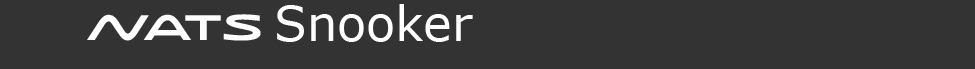
<style>
.page{position:relative;width:975px;height:69px;background:#333333}
.page>*{position:absolute;margin:0}
.t1{font:48px "Verdana";color:#ffffff}
.t2{font:48px "Verdana";color:#000000}
.t3{font:48px "NATS-Logo";color:#ffffff}
</style>
<div class="page">
<p class="t1" style="left:277px;top:4px;width:196px;height:38px"><span class="t2"> </span>Snooker</p>
<p class="t3" style="left:87px;top:14px;width:174px;height:27px">n</p>
</div>
